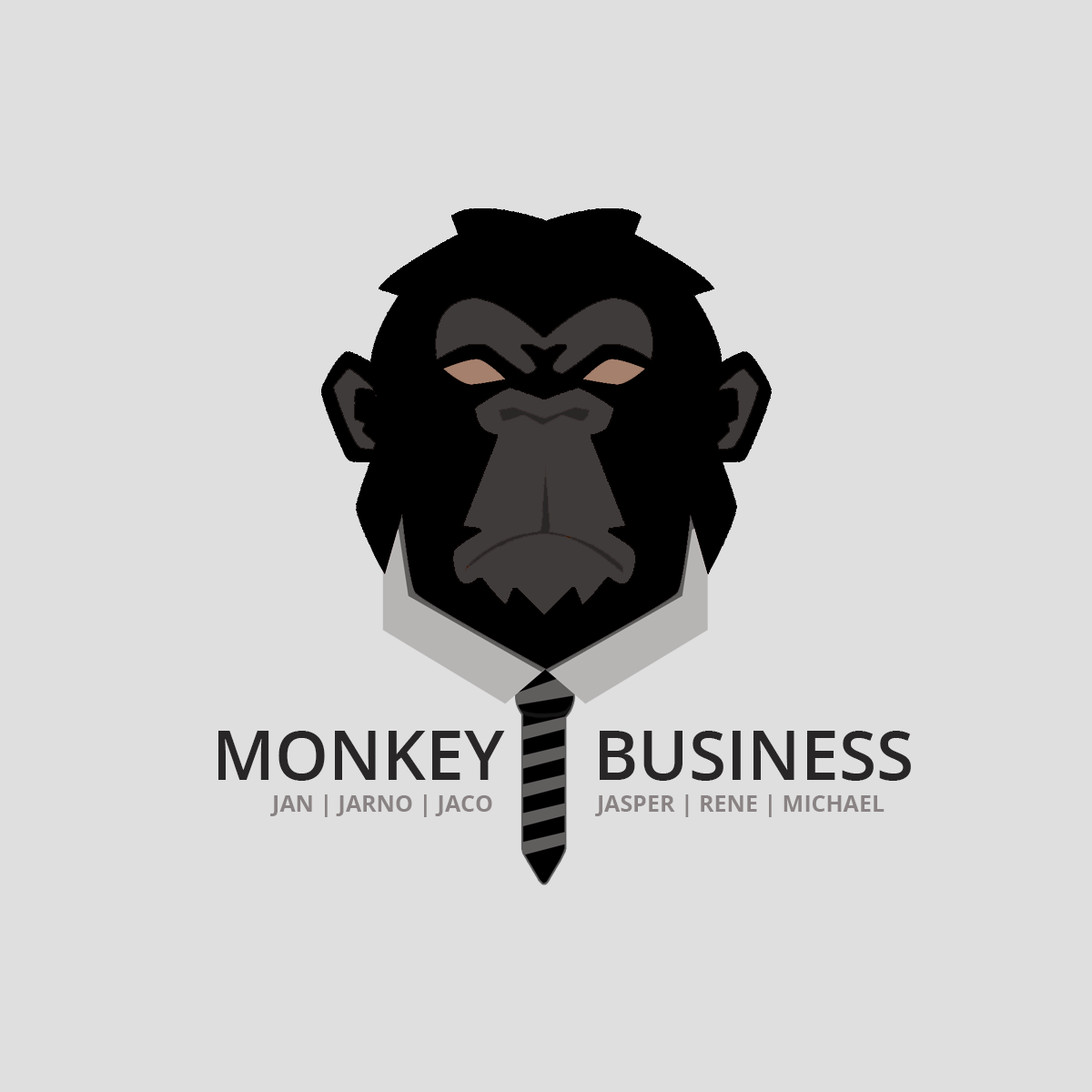
<style>
.page{position:relative;width:1092px;height:1092px;background:#dfdfdf}
.page>*{position:absolute;margin:0}
.t1{font:68.2px "OpenSans-Semibold";color:#282626}
.t2{font:22.7px "OpenSans-Bold";color:#8a8383}
</style>
<div class="page">
<p class="t1" style="left:218px;top:731px;width:693px;height:50px">MONKEY     BUSINESS</p>
<p class="t2" style="left:270px;top:794px;width:222px;height:23px">JAN | JARNO | JACO</p>
<p class="t2" style="left:595px;top:794px;width:290px;height:23px">JASPER | RENE | MICHAEL</p>
</div>
